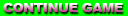
<style>
.page{position:relative;width:128px;height:16px;background:#00ff00}
.page>*{position:absolute;margin:0}
.t1{font:11.9px "Arial-Black";scale:1.05 1}
</style>
<div class="page">
<p class="t1" style="left:3px;top:3px;width:120px;height:9px">CONTINUE GAME</p>
</div>
